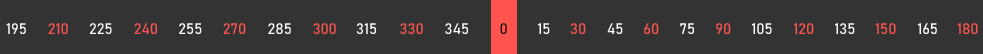
<style>
.page{position:relative;width:983px;height:54px;background:#333333}
.page>*{position:absolute;margin:0}
.t1{font:15px "Bahnschrift_380wght";color:#fffefe}
.t2{font:15px "Bahnschrift_380wght";color:#ff544f}
.t3{font:15px "Bahnschrift_380wght";color:#ffffff}
.t4{font:15px "Bahnschrift_380wght";color:#000000}
</style>
<div class="page">
<p class="t1" style="left:6px;top:23px;width:20px;height:11px">195</p>
<p class="t2" style="left:48px;top:23px;width:20px;height:11px">210</p>
<p class="t1" style="left:89px;top:23px;width:23px;height:11px">225</p>
<p class="t2" style="left:134px;top:23px;width:23px;height:11px">240</p>
<p class="t3" style="left:179px;top:23px;width:23px;height:11px">255</p>
<p class="t2" style="left:223px;top:23px;width:23px;height:11px">270</p>
<p class="t3" style="left:268px;top:23px;width:23px;height:11px">285</p>
<p class="t2" style="left:313px;top:23px;width:23px;height:11px">300</p>
<p class="t3" style="left:356px;top:23px;width:20px;height:11px">315</p>
<p class="t2" style="left:400px;top:23px;width:23px;height:11px">330</p>
<p class="t3" style="left:445px;top:23px;width:23px;height:11px">345</p>
<p class="t4" style="left:500px;top:23px;width:7px;height:11px">0</p>
<p class="t3" style="left:538px;top:23px;width:12px;height:11px">15</p>
<p class="t2" style="left:570px;top:23px;width:16px;height:11px">30</p>
<p class="t3" style="left:607px;top:23px;width:16px;height:11px">45</p>
<p class="t2" style="left:644px;top:23px;width:15px;height:11px">60</p>
<p class="t3" style="left:680px;top:23px;width:14px;height:11px">75</p>
<p class="t2" style="left:716px;top:23px;width:15px;height:11px">90</p>
<p class="t3" style="left:752px;top:23px;width:20px;height:11px">105</p>
<p class="t2" style="left:794px;top:23px;width:20px;height:11px">120</p>
<p class="t3" style="left:835px;top:23px;width:20px;height:11px">135</p>
<p class="t2" style="left:875px;top:23px;width:21px;height:11px">150</p>
<p class="t3" style="left:918px;top:23px;width:19px;height:11px">165</p>
<p class="t2" style="left:957px;top:23px;width:21px;height:11px">180</p>
</div>
